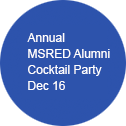
<style>
.page{position:relative;width:126px;height:126px;background:#2d53ac}
.page>*{position:absolute;margin:0}
.t1{font:12px/16px "ArialMT";color:#ffffff}
</style>
<div class="page">
<p class="t1" style="left:27px;top:33px;width:83px;height:57px;text-align:right">Annual<br>MSRED Alumni<br>Cocktail Party<br>Dec 16</p>
</div>
